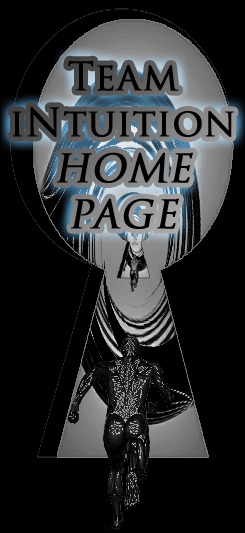
<style>
.page{position:relative;width:245px;height:533px;background:#000000}
.page>*{position:absolute;margin:0}
.t1{font:38.3px "TrajanPro-Regular";color:#000000;font-weight:bold}
.t2{font:38.3px "TrajanPro-Regular";color:#000000;font-weight:bold;font-style:italic}
</style>
<div class="page">
<p class="t1" style="left:12px;top:60px;width:222px;height:169px;text-align:center">Team<br>iNtuition<br><span class="t2">HOME PAGE</span></p>
</div>
